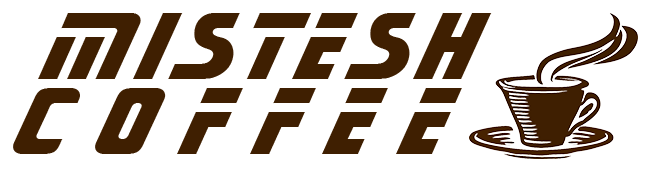
<style>
.page{position:relative;width:654px;height:174px;background:#ffffff}
.page>*{position:absolute;margin:0}
.t1{font:100px/75px "SonicBT-ExtraBold";letter-spacing:0.063em;color:#3f1f01}
.t2{font:100px/75px "SonicBT-ExtraBold";letter-spacing:0.263em;color:#3f1f01}
</style>
<div class="page">
<p class="t1" style="left:13px;top:13px;width:479px;height:141px;text-align:center">Mistesh<br> <span class="t2">Coffee</span></p>
</div>
